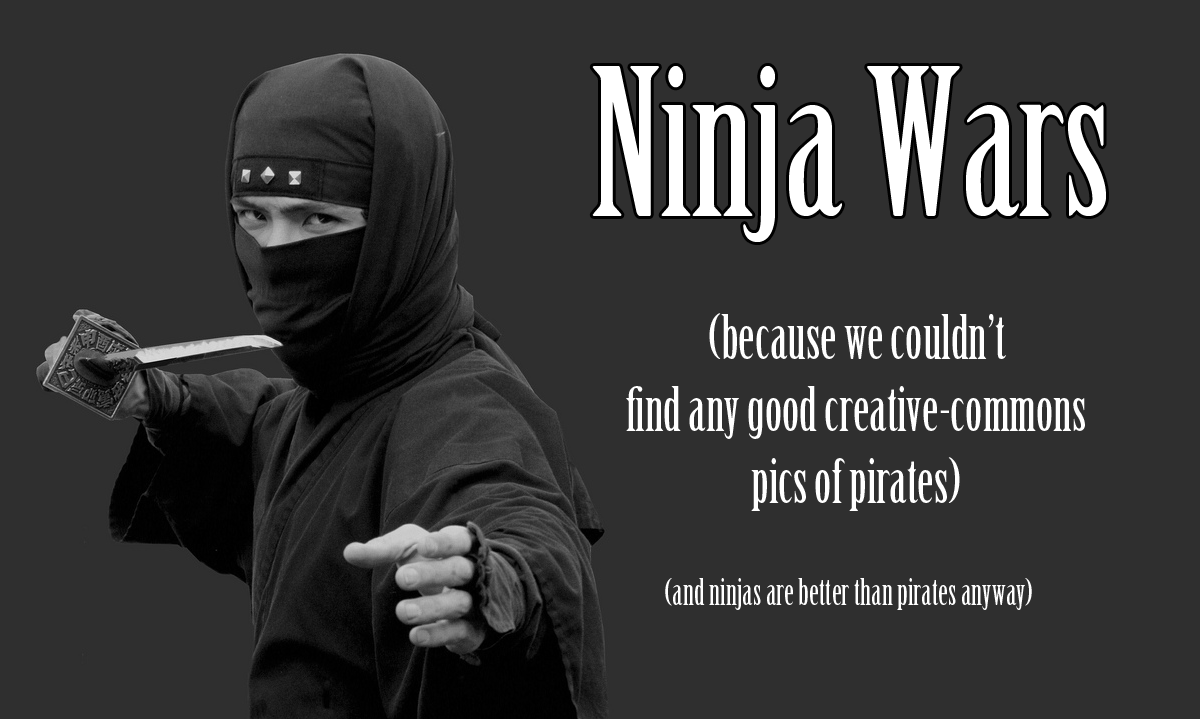
<style>
.page{position:relative;width:1200px;height:719px;background:#2f2f2f}
.page>*{position:absolute;margin:0}
.t1{font:200px "BirchStd";color:#ffffff}
.t2{font:60px "BirchStd";color:#ffffff}
.t3{font:36px "BirchStd";color:#ffffff}
</style>
<div class="page">
<p class="t1" style="left:592px;top:66px;width:514px;height:176px">Ninja Wars</p>
<p class="t2" style="left:626px;top:313px;width:459px;height:198px;text-align:center">(because we couldn’t<br>find any good creative-commons<br>pics of pirates)</p>
<p class="t3" style="left:665px;top:578px;width:367px;height:32px">(and ninjas are better than pirates anyway)</p>
</div>
